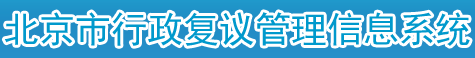
<style>
.page{position:relative;width:475px;height:58px;background:#ffffff}
.page>*{position:absolute;margin:0}
.t1{font:36px "SimHei";color:#0099cc}
</style>
<div class="page">
<p class="t1" style="left:4px;top:12px;width:466px;height:34px">北京市行政复议管理信息系统</p>
</div>
